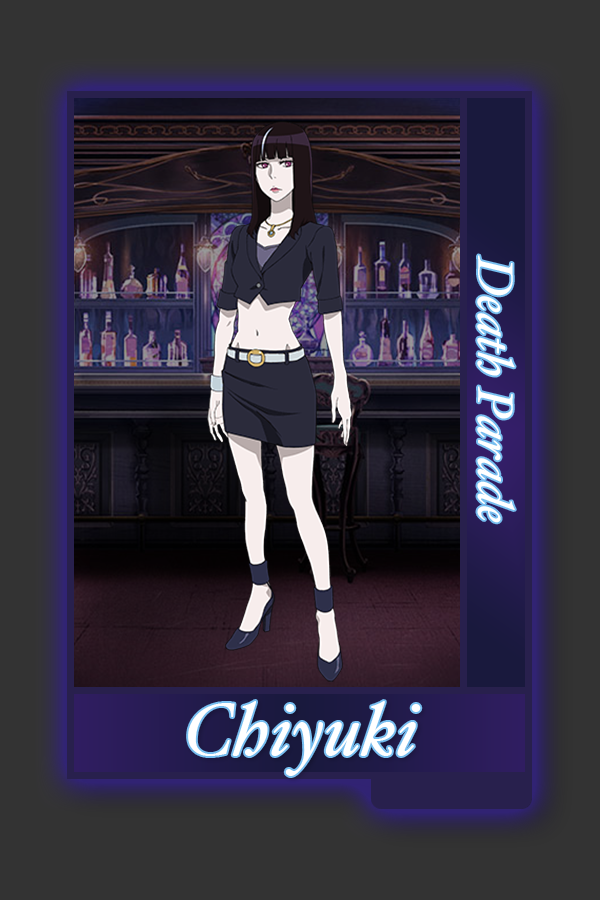
<style>
.page{position:relative;width:600px;height:900px;background:#333333}
.page>*{position:absolute;margin:0}
.t1{font:50px "HoeflerText-Italic";color:#ffffff}
.t2{font:75px "HoeflerText-Italic";color:#ffffff}
</style>
<div class="page">
<p class="t1" style="left:477px;top:255px;width:38px;height:268px;rotate:90deg">Death Parade</p>
<p class="t2" style="left:188px;top:701px;width:233px;height:75px">Chiyuki</p>
</div>
